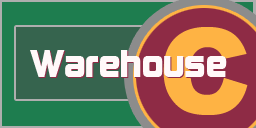
<style>
.page{position:relative;width:256px;height:128px;background:#1e7d4f}
.page>*{position:absolute;margin:0}
.t1{font:120px "Arial-Black";color:#feb344}
.t2{font:36px "Kimberley";color:#fff9f9}
</style>
<div class="page">
<p class="t1" style="left:163px;top:27px;width:85px;height:88px">C</p>
<p class="t2" style="left:30px;top:50px;width:197px;height:27px">Warehouse</p>
<p class="t2" style="left:31px;top:51px;width:197px;height:27px">Warehouse</p>
</div>
